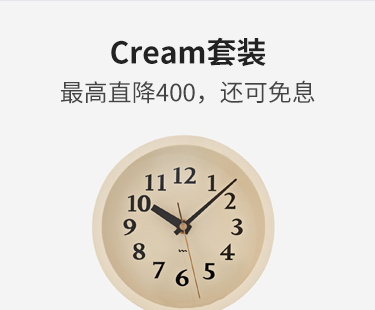
<style>
.page{position:relative;width:375px;height:310px;background:#f4f4f4}
.page>*{position:absolute;margin:0}
.t1{font:30px "SourceHanSansCN-Bold";color:#222222}
.t2{font:24px "SourceHanSansCN-Regular";color:#444444}
</style>
<div class="page">
<p class="t1" style="left:111px;top:37px;width:155px;height:30px">Cream套装</p>
<p class="t1" style="left:111px;top:37px;width:155px;height:30px">Cream套装</p>
<p class="t2" style="left:61px;top:80px;width:254px;height:24px">最高直降400，还可免息</p>
<p class="t2" style="left:61px;top:80px;width:254px;height:24px">最高直降400，还可免息</p>
<p class="t2" style="left:61px;top:80px;width:254px;height:24px">最高直降400，还可免息</p>
<p class="t2" style="left:61px;top:80px;width:254px;height:24px">最高直降400，还可免息</p>
</div>
